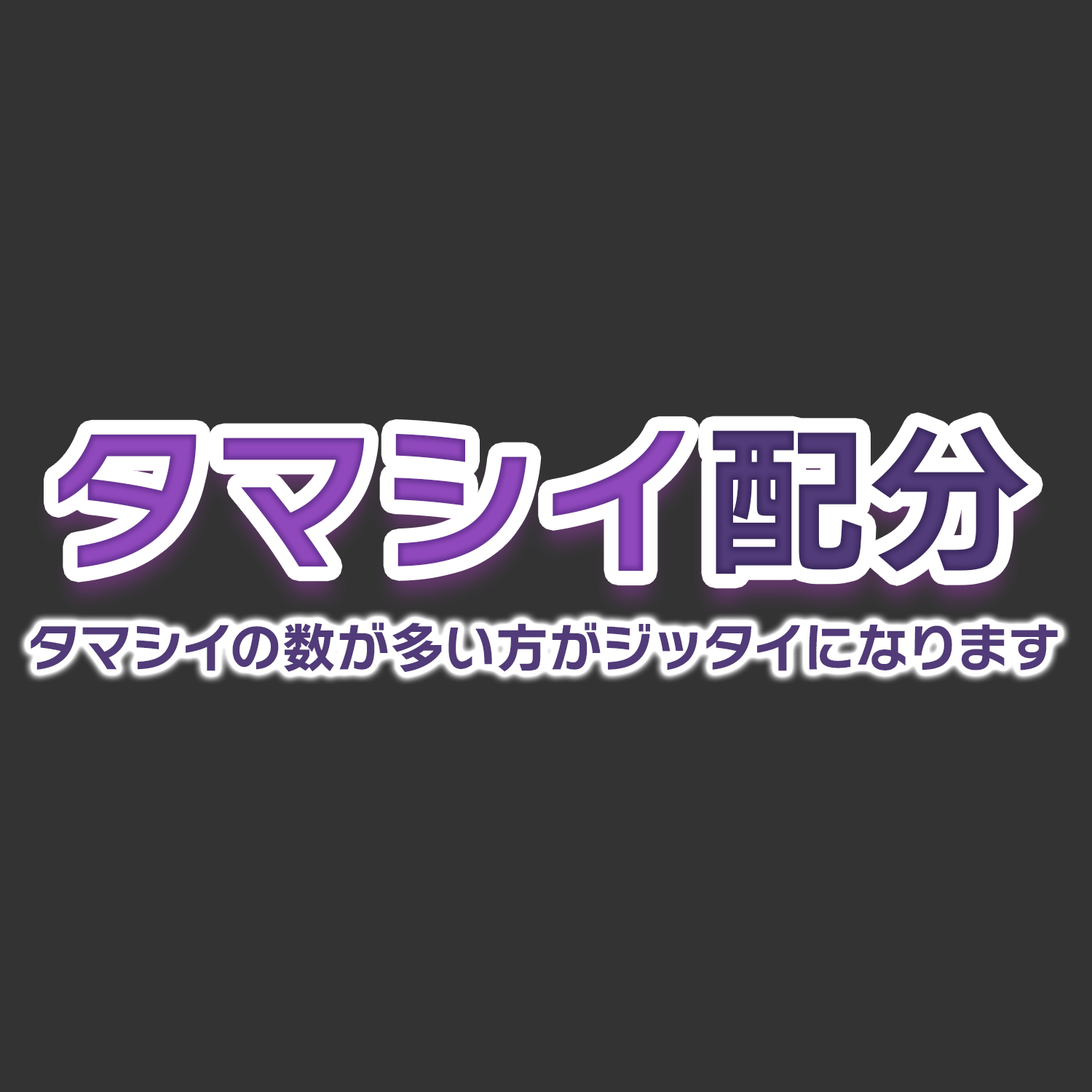
<style>
.page{position:relative;width:1092px;height:1092px;background:#333333}
.page>*{position:absolute;margin:0}
.t1{font:164.2px "NitalagoRuika-06";color:#9049bd}
.t2{font:164.2px "NitalagoRuika-06";color:#513b79}
.t3{font:53.5px "NitalagoRuika-06";color:#513b79}
</style>
<div class="page">
<p class="t1" style="left:58px;top:427px;width:971px;height:147px">タマシイ<span class="t2">配分</span></p>
<p class="t3" style="left:31px;top:622px;width:1027px;height:50px">タマシイの数が多い方がジッタイになります</p>
</div>
